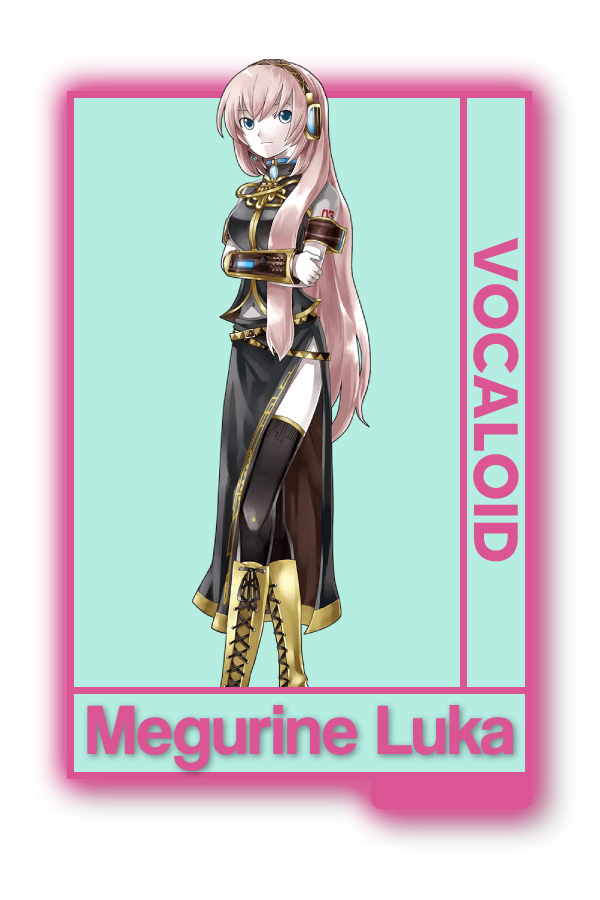
<style>
.page{position:relative;width:600px;height:900px;background:#b5ede1}
.page>*{position:absolute;margin:0}
.t1{font:62.5px "MADETOMMY-Bold";color:#db5493}
.t2{font:72.8px "CoolveticaRg-Regular";color:#db5493}
</style>
<div class="page">
<p class="t1" style="left:473px;top:237px;width:46px;height:325px;rotate:90deg">VOCALOID</p>
<p class="t2" style="left:87px;top:705px;width:426px;height:66px">Megurine Luka</p>
</div>
